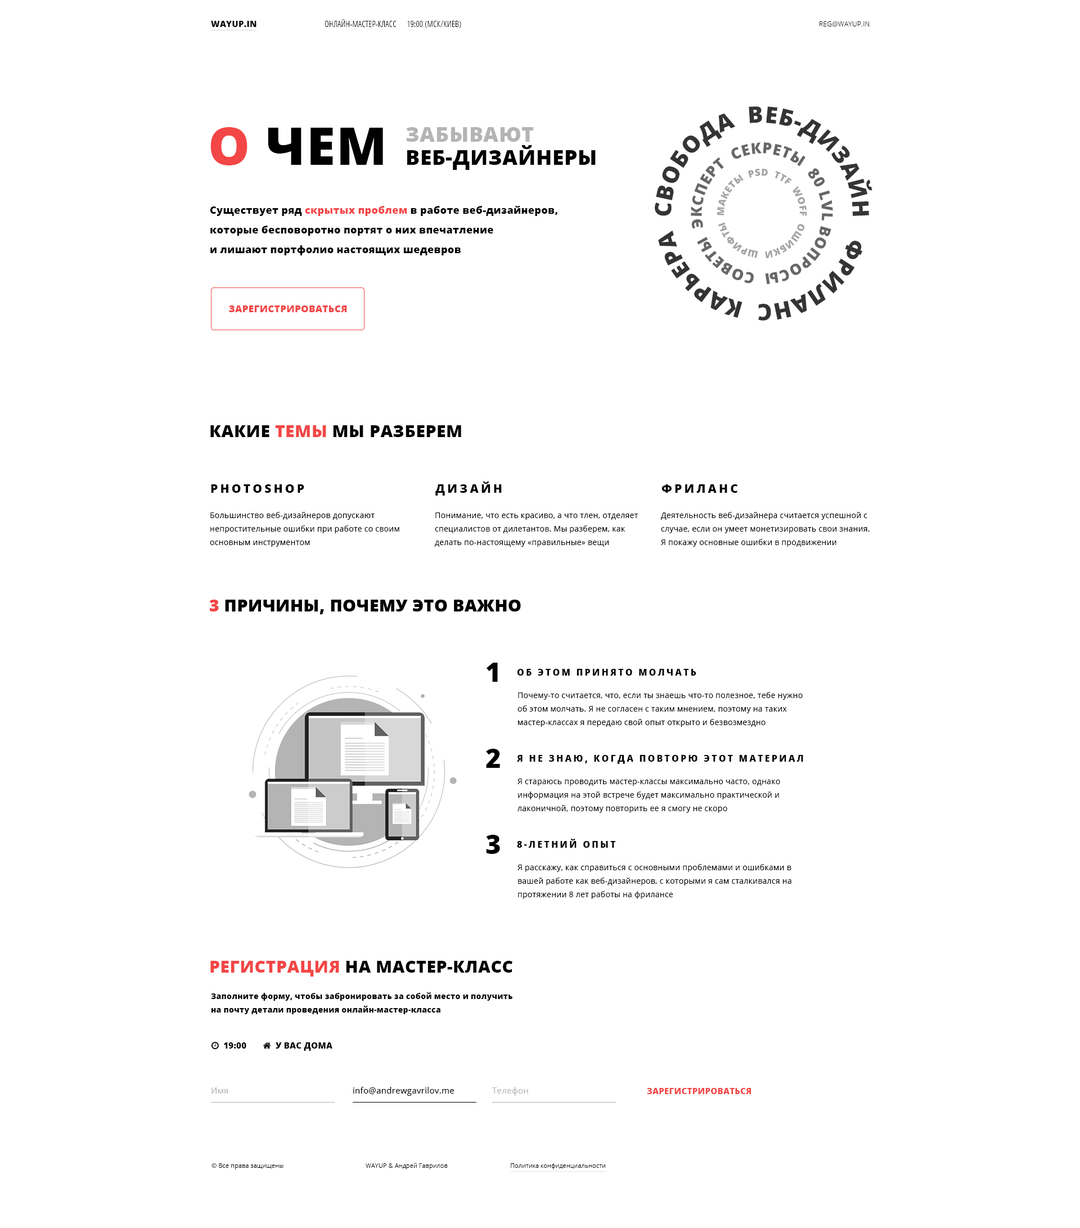
<style>
.page{position:relative;width:1080px;height:1228px;background:#ffffff}
.page>*{position:absolute;margin:0}
.t1{font:8.4px "OpenSans-Extrabold";letter-spacing:0.02em;color:#000000;text-transform:uppercase}
.t2{font:8.4px "OpenSans-CondensedLight";letter-spacing:0.02em;color:#000000;text-transform:uppercase}
.t3{font:6.8px "OpenSans-Light";letter-spacing:0.02em;color:#000000;text-transform:uppercase}
.t4{font:22.8px/55.1px "OpenSans-Extrabold";letter-spacing:0.02em;color:#343434;text-transform:uppercase}
.t5{font:52.3px "OpenSans-Extrabold";letter-spacing:0.02em;color:#000000;text-transform:uppercase}
.t6{font:52.3px "OpenSans-Extrabold";letter-spacing:0.02em;color:#f34646;text-transform:uppercase}
.t7{font:20.8px/23.1px "OpenSans-Extrabold";letter-spacing:0.02em;color:#000000;text-transform:uppercase}
.t8{font:20.8px/23.1px "OpenSans-Extrabold";letter-spacing:0.02em;color:#b4b4b4;text-transform:uppercase}
.t9{font:15.1px/36.5px "OpenSans-Extrabold";letter-spacing:0.02em;color:#676767;text-transform:uppercase}
.t10{font:9.6px/23.1px "OpenSans-Extrabold";letter-spacing:0.02em;color:#a3a3a3;text-transform:uppercase}
.t11{font:10.1px/19.7px "OpenSans-Extrabold";letter-spacing:0.02em;color:#000000}
.t12{font:10.1px/19.7px "OpenSans-Extrabold";letter-spacing:0.02em;color:#f34646}
.t13{font:9.6px "OpenSans-Extrabold";letter-spacing:0.02em;color:#f34646;text-transform:uppercase}
.t14{font:16.9px "OpenSans-Extrabold";letter-spacing:0.02em;color:#000000;text-transform:uppercase}
.t15{font:16.9px "OpenSans-Extrabold";letter-spacing:0.02em;color:#f34646;text-transform:uppercase}
.t16{font:11.8px "OpenSans-Extrabold";letter-spacing:0.2em;color:#000000;text-transform:uppercase}
.t17{font:7.9px/13.5px "OpenSans";letter-spacing:0.02em;color:#000000}
.t18{font:26.4px "OpenSans-Extrabold";letter-spacing:0.2em;color:#000000;text-transform:uppercase}
.t19{font:9px "OpenSans-Extrabold";letter-spacing:0.2em;color:#000000;text-transform:uppercase}
.t20{font:7.9px/13.5px "OpenSans-Extrabold";letter-spacing:0.02em;color:#000000}
.t21{font:8.4px "OpenSans";letter-spacing:0.02em;color:#b5b5b5}
.t22{font:8.4px "OpenSans";letter-spacing:0.02em;color:#000000}
.t23{font:8.4px "OpenSans-Extrabold";letter-spacing:0.02em;color:#f34646;text-transform:uppercase}
.t24{font:6.2px "OpenSans-Light";letter-spacing:0.02em;color:#000000}
</style>
<div class="page">
<p class="t1" style="left:211px;top:21px;width:45px;height:6px">wayup.in</p>
<p class="t2" style="left:325px;top:19px;width:136px;height:9px">онлайн-мастер-класс      19:00 (мск/киев)</p>
<p class="t3" style="left:820px;top:21px;width:50px;height:6px">reg@wayup.in</p>
<p class="t4" style="left:655px;top:106px;width:217px;height:215px;text-align:center">фриланс  карьера  Свобода  веб-дизайн</p>
<p class="t5" style="left:210px;top:127px;width:173px;height:38px"><span class="t6">о</span> чем</p>
<p class="t7" style="left:406px;top:127px;width:190px;height:43px"><span class="t8">забывают<br></span>веб-дизайнеры</p>
<p class="t9" style="left:691px;top:142px;width:142px;height:143px;text-align:center">вопросы  советы  Эксперт  секреты  80 lvl</p>
<p class="t10" style="left:717px;top:169px;width:90px;height:89px;text-align:center">ошибки  шрифты  макеты  psd  ttf  woff</p>
<p class="t11" style="left:210px;top:206px;width:347px;height:49px">Существует ряд <span class="t12">скрытых проблем</span> в работе веб-дизайнеров,<br>которые бесповоротно портят о них впечатление<br>и лишают портфолио настоящих шедевров</p>
<p class="t13" style="left:229px;top:305px;width:118px;height:7px">зарегистрироваться</p>
<p class="t14" style="left:210px;top:425px;width:251px;height:12px">какие <span class="t15">темы</span> мы разберем</p>
<p class="t16" style="left:211px;top:484px;width:93px;height:9px">photoshop</p>
<p class="t16" style="left:435px;top:482px;width:67px;height:14px">дизайн</p>
<p class="t16" style="left:662px;top:484px;width:76px;height:9px">фриланс</p>
<p class="t17" style="left:210px;top:512px;width:189px;height:35px">Большинство веб-дизайнеров допускают непростительные ошибки при работе со своим основным инструментом</p>
<p class="t17" style="left:435px;top:512px;width:203px;height:35px">Понимание, что есть красиво, а что тлен, отделяет специалистов от дилетантов. Мы разберем, как делать по-настоящему «правильные» вещи</p>
<p class="t17" style="left:661px;top:512px;width:209px;height:35px">Деятельность веб-дизайнера считается успешной с случае, если он умеет монетизировать свои знания. Я покажу основные ошибки в продвижении</p>
<p class="t14" style="left:210px;top:600px;width:311px;height:14px"><span class="t15">3</span> причины, почему это важно</p>
<p class="t14" style="left:210px;top:600px;width:311px;height:14px"><span class="t15">3</span> причины, почему это важно</p>
<p class="t18" style="left:487px;top:663px;width:11px;height:19px">1</p>
<p class="t19" style="left:517px;top:669px;width:179px;height:7px">об этом принято молчать</p>
<p class="t17" style="left:518px;top:692px;width:285px;height:35px">Почему-то считается, что, если ты знаешь что-то полезное, тебе нужно об этом молчать. Я не согласен с таким мнением, поэтому на таких мастер-классах я передаю свой опыт открыто и безвозмездно</p>
<p class="t18" style="left:486px;top:749px;width:14px;height:19px">2</p>
<p class="t19" style="left:517px;top:755px;width:286px;height:9px">я не знаю, когда повторю этот материал</p>
<p class="t17" style="left:518px;top:778px;width:262px;height:35px">Я стараюсь проводить мастер-классы максимально часто, однако информация на этой встрече будет максимально практической и лаконичной, поэтому повторить ее я смогу не скоро</p>
<p class="t18" style="left:486px;top:835px;width:14px;height:19px">3</p>
<p class="t19" style="left:517px;top:839px;width:99px;height:9px">8-летний опыт</p>
<p class="t17" style="left:518px;top:864px;width:273px;height:35px">Я расскажу, как справиться с основными проблемами и ошибками в вашей работе как веб-дизайнеров, с которыми я сам сталкивался на протяжении 8 лет работы на фрилансе</p>
<p class="t14" style="left:210px;top:961px;width:302px;height:15px"><span class="t15">Регистрация</span> на мастер-класс</p>
<p class="t20" style="left:211px;top:992px;width:301px;height:22px">Заполните форму, чтобы забронировать за собой место и получить на почту детали проведения онлайн-мастер-класса</p>
<p class="t21" style="left:212px;top:1087px;width:16px;height:7px">Имя</p>
<p class="t22" style="left:353px;top:1087px;width:101px;height:9px">info@andrewgavrilov.me</p>
<p class="t21" style="left:492px;top:1087px;width:36px;height:9px">Телефон</p>
<p class="t23" style="left:647px;top:1088px;width:104px;height:6px">зарегистрироваться</p>
<p class="t24" style="left:212px;top:1163px;width:72px;height:6px">© Все права защищены</p>
<p class="t24" style="left:366px;top:1163px;width:82px;height:6px">WAYUP &amp; Андрей Гаврилов</p>
<p class="t24" style="left:511px;top:1163px;width:94px;height:6px">Политика конфиденциальности</p>
</div>
